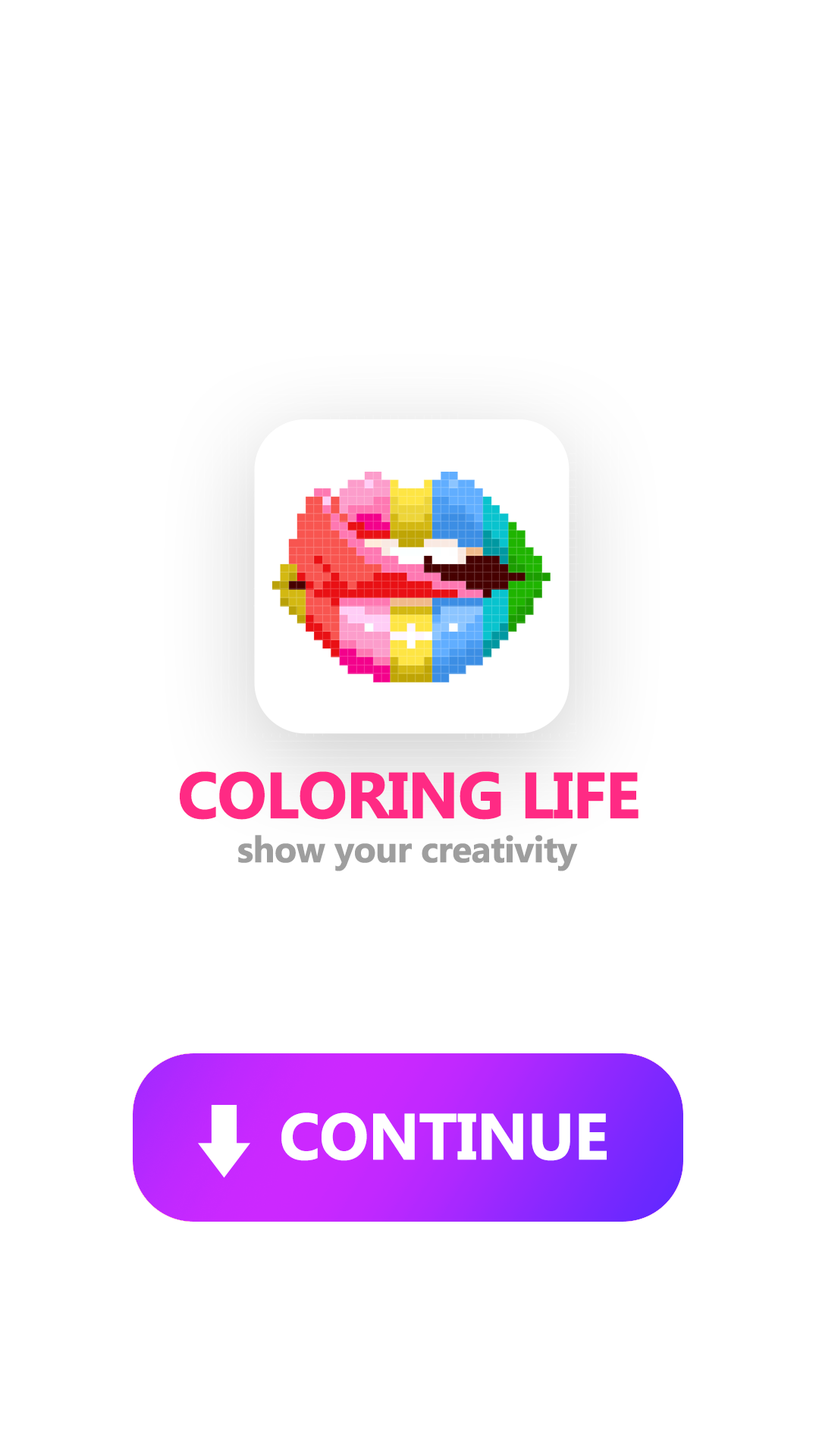
<style>
.page{position:relative;width:819px;height:1456px;background:#ffffff}
.page>*{position:absolute;margin:0}
.t1{font:64.7px "MicrosoftPhagsPa-Bold";letter-spacing:-0.038em;color:#ff2a84;font-weight:bold}
.t2{font:36.4px "MicrosoftPhagsPa-Bold";letter-spacing:-0.038em;color:#9e9e9e;font-weight:bold}
.t3{font:65.3px "MicrosoftPhagsPa-Bold";letter-spacing:-0.038em;color:#ffffff;font-weight:bold}
</style>
<div class="page">
<p class="t1" style="left:180px;top:771px;width:459px;height:49px">COLORING LIFE</p>
<p class="t2" style="left:238px;top:835px;width:340px;height:36px">show your creativity</p>
<p class="t3" style="left:281px;top:1112px;width:326px;height:49px">CONTINUE</p>
</div>
